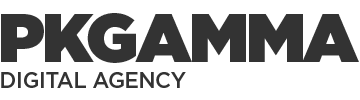
<style>
.page{position:relative;width:360px;height:100px;background:#ffffff}
.page>*{position:absolute;margin:0}
.t1{font:68.9px "Gotham-Ultra";letter-spacing:-0.035em;color:#333333}
.t2{font:21.7px "Gotham-Medium";letter-spacing:-0.025em;color:#333333}
</style>
<div class="page">
<p class="t1" style="left:1px;top:13px;width:358px;height:50px">PKGAMMA</p>
<p class="t2" style="left:1px;top:72px;width:185px;height:16px">DIGITAL AGENCY</p>
</div>
